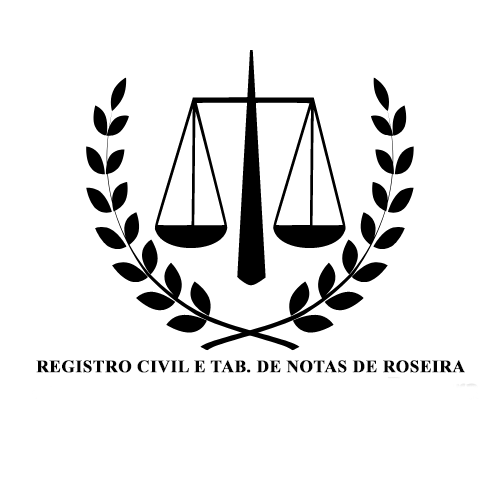
<style>
.page{position:relative;width:500px;height:500px;background:#ffffff}
.page>*{position:absolute;margin:0}
.t1{font:17.3px "TimesNewRomanPS-BoldMT";letter-spacing:0.005em;color:#030303;text-transform:uppercase;font-weight:bold}
</style>
<div class="page">
<p class="t1" style="left:36px;top:360px;width:429px;height:13px">Registro Civil e Tab. de Notas de Roseira</p>
</div>
